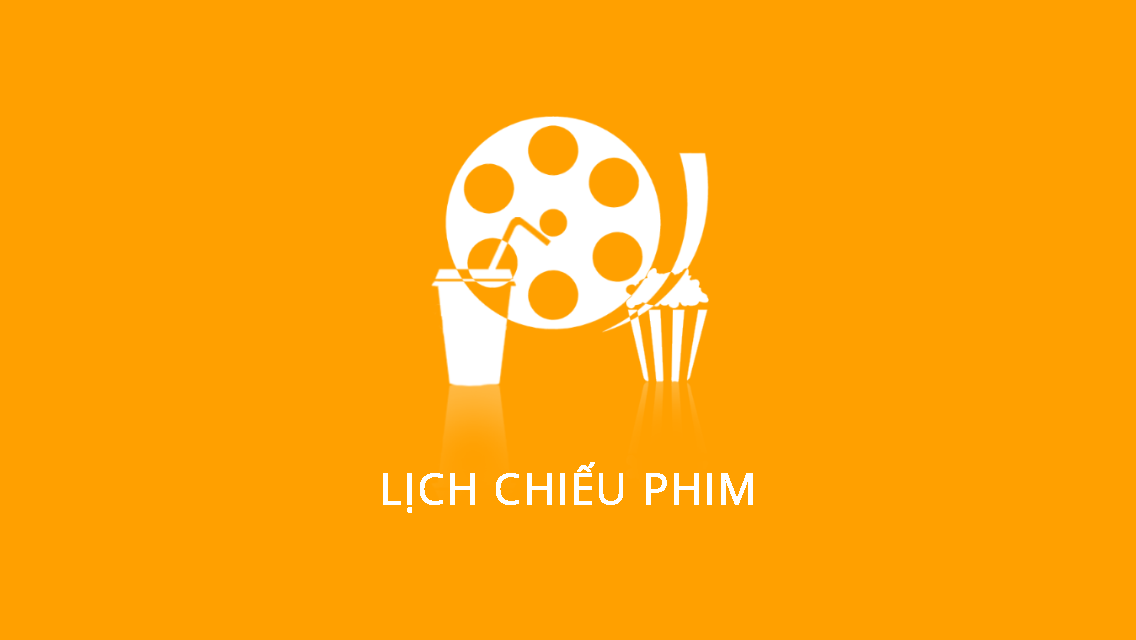
<style>
.page{position:relative;width:1136px;height:640px;background:#ffa000}
.page>*{position:absolute;margin:0}
.t1{font:43.2px "OpenSans";color:#ffffff;font-weight:bold}
</style>
<div class="page">
<p class="t1" style="left:383px;top:462px;width:370px;height:51px">LỊCH CHIẾU PHIM</p>
</div>
